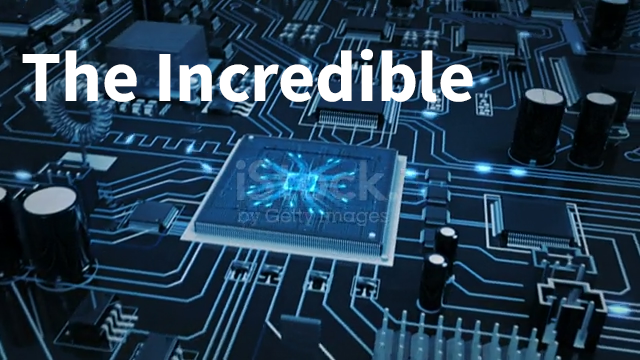
<style>
.page{position:relative;width:640px;height:360px}
.page>*{position:absolute;margin:0}
.t1{font:72px "SourceSansRoman-Bold";color:#ffffff}
</style>
<div class="page">
<p class="t1" style="left:22px;top:49px;width:451px;height:53px">The Incredible</p>
</div>
